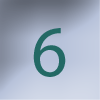
<style>
.page{position:relative;width:100px;height:100px}
.page>*{position:absolute;margin:0}
.t1{font:72px "MyriadPro-Regular";color:#236965}
</style>
<div class="page">
<p class="t1" style="left:33px;top:28px;width:33px;height:49px">6</p>
</div>
